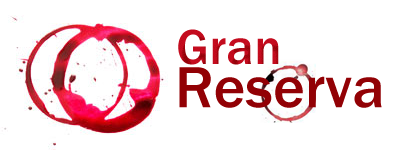
<style>
.page{position:relative;width:400px;height:150px;background:#ffffff}
.page>*{position:absolute;margin:0}
.t1{font:51px "FranklinGothic-Medium";letter-spacing:0.005em;color:#c00b1d}
.t2{font:60px "FranklinGothic-Medium";letter-spacing:0.005em;color:#930209}
</style>
<div class="page">
<p class="t1" style="left:178px;top:29px;width:101px;height:36px">Gran</p>
<p class="t2" style="left:179px;top:67px;width:203px;height:41px">Reserva</p>
</div>
